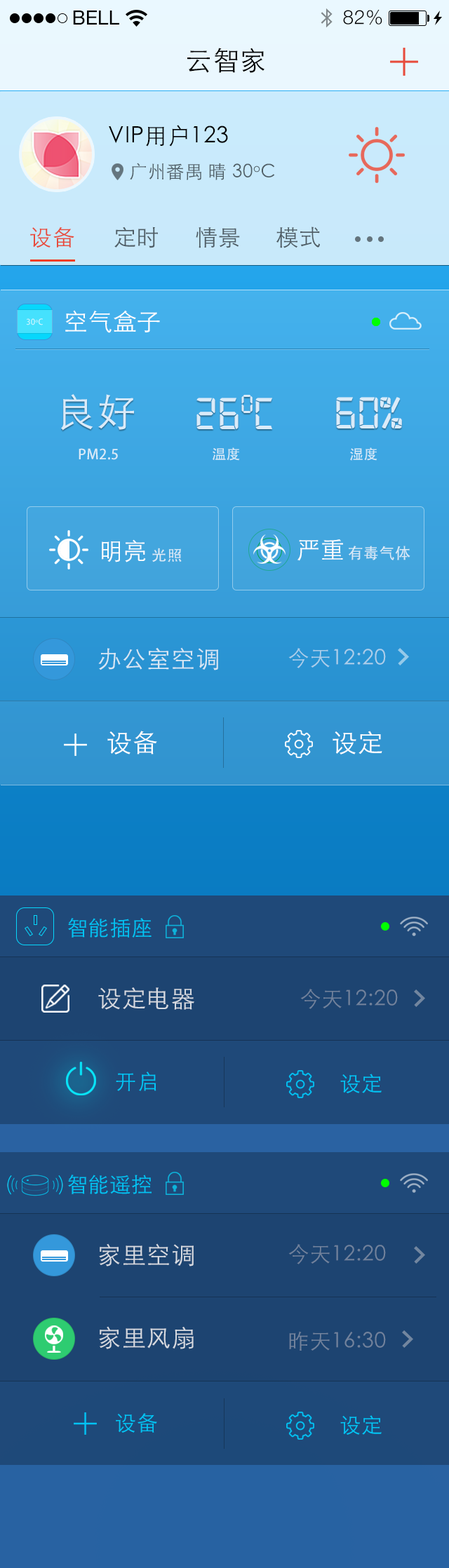
<style>
.page{position:relative;width:449px;height:1568px}
.page>*{position:absolute;margin:0}
.t1{font:19.6px "HelveticaNeue";color:#000000;text-transform:uppercase}
.t2{font:19.6px "HelveticaNeue-Light";letter-spacing:0.025em;color:#000000}
.t3{font:26.6px "STHeitiSC-Light";letter-spacing:0.025em;color:#000000}
.t4{font:22.4px "STHeitiSC-Light";letter-spacing:0.025em;color:#000000}
.t5{font:18.2px "STHeitiSC-Light";letter-spacing:0.025em;color:#4f5e65}
.t6{font:22.4px "STHeitiSC-Light";letter-spacing:0.025em;color:#e74c3c}
.t7{font:22.4px "STHeitiSC-Light";letter-spacing:0.025em;color:#4f5d65}
.t8{font:23.8px "STHeitiSC-Light";letter-spacing:0.025em;color:#ffffff}
.t9{font:7.8px "AdobeHeitiStd-Regular";letter-spacing:0.025em;color:#cbf5fe}
.t10{font:38.6px "STHeitiSC-Light";letter-spacing:0.025em;color:#daebf9}
.t11{font:47.7px "Digital-7Mono";letter-spacing:0.025em;color:#daebf9}
.t12{font:23.8px "AdobeHeitiStd-Regular";letter-spacing:0.025em;color:#d9ebf8}
.t13{font:15.4px "AdobeHeitiStd-Regular";letter-spacing:0.025em;color:#daeaf7}
.t14{font:23.8px "STHeitiSC-Light";letter-spacing:0.025em;color:#d7e7f4}
.t15{font:21px "STHeitiSC-Light";letter-spacing:0.025em;color:#abceea}
.t16{font:25.2px "STHeitiSC-Light";letter-spacing:0.025em;color:#ffffff}
.t17{font:21px "STHeitiSC-Light";letter-spacing:0.025em;color:#01c5f6}
.t18{font:23.8px "STHeitiSC-Light";letter-spacing:0.025em;color:#d6dae1}
.t19{font:21px "STHeitiSC-Light";letter-spacing:0.025em;color:#71829c}
</style>
<div class="page">
<p class="t1" style="left:73px;top:11px;width:46px;height:14px">Bell</p>
<p class="t2" style="left:343px;top:10px;width:39px;height:15px">82%</p>
<p class="t3" style="left:187px;top:48px;width:78px;height:25px">云智家</p>
<p class="t4" style="left:109px;top:125px;width:119px;height:22px">VIP用户123</p>
<p class="t5" style="left:130px;top:163px;width:145px;height:17px">广州番禺 晴 30oC</p>
<p class="t6" style="left:30px;top:227px;width:44px;height:21px">设备</p>
<p class="t7" style="left:114px;top:227px;width:44px;height:21px">定时</p>
<p class="t7" style="left:196px;top:227px;width:44px;height:21px">情景</p>
<p class="t7" style="left:276px;top:227px;width:44px;height:21px">模式</p>
<p class="t8" style="left:65px;top:310px;width:95px;height:23px">空气盒子</p>
<p class="t9" style="left:26px;top:318px;width:17px;height:7px">30oC</p>
<p class="t10" style="left:61px;top:394px;width:73px;height:37px">良好</p>
<p class="t11" style="left:196px;top:395px;width:76px;height:34px">26oC</p>
<p class="t11" style="left:336px;top:397px;width:66px;height:31px">60%</p>
<p class="t12" style="left:79px;top:448px;width:39px;height:12px">PM2.5</p>
<p class="t12" style="left:212px;top:447px;width:28px;height:14px">温度</p>
<p class="t12" style="left:350px;top:447px;width:27px;height:14px">湿度</p>
<p class="t8" style="left:102px;top:539px;width:44px;height:23px">明亮</p>
<p class="t8" style="left:297px;top:539px;width:46px;height:22px">严重</p>
<p class="t13" style="left:348px;top:546px;width:62px;height:14px">有毒气体</p>
<p class="t13" style="left:152px;top:548px;width:30px;height:14px">光照</p>
<p class="t14" style="left:98px;top:647px;width:120px;height:23px">办公室空调</p>
<p class="t15" style="left:288px;top:648px;width:98px;height:20px">今天12:20</p>
<p class="t16" style="left:107px;top:731px;width:50px;height:24px">设备</p>
<p class="t16" style="left:332px;top:731px;width:50px;height:24px">设定</p>
<p class="t17" style="left:68px;top:918px;width:83px;height:20px">智能插座</p>
<p class="t18" style="left:98px;top:987px;width:96px;height:23px">设定电器</p>
<p class="t19" style="left:300px;top:989px;width:98px;height:20px">今天12:20</p>
<p class="t17" style="left:116px;top:1072px;width:40px;height:19px">开启</p>
<p class="t17" style="left:340px;top:1074px;width:41px;height:19px">设定</p>
<p class="t17" style="left:68px;top:1175px;width:83px;height:19px">智能遥控</p>
<p class="t18" style="left:99px;top:1243px;width:95px;height:23px">家里空调</p>
<p class="t19" style="left:288px;top:1244px;width:98px;height:20px">今天12:20</p>
<p class="t18" style="left:99px;top:1326px;width:95px;height:23px">家里风扇</p>
<p class="t19" style="left:289px;top:1331px;width:97px;height:20px">昨天16:30</p>
<p class="t17" style="left:116px;top:1413px;width:41px;height:20px">设备</p>
<p class="t17" style="left:340px;top:1415px;width:41px;height:20px">设定</p>
</div>
